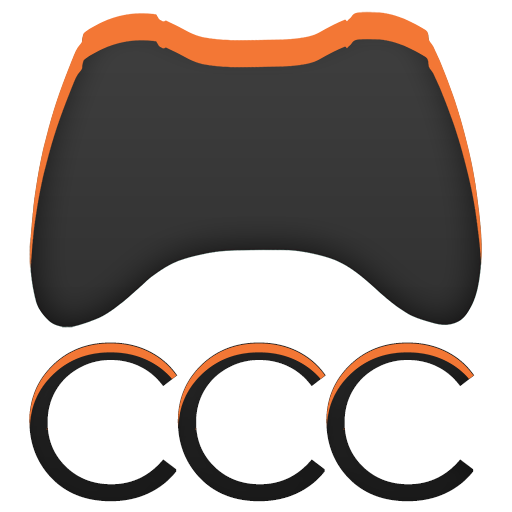
<style>
.page{position:relative;width:512px;height:512px;background:#ffffff}
.page>*{position:absolute;margin:0}
.t1{font:206.2px "CenturyGothic";letter-spacing:-0.12em;color:#1e1e1e;font-weight:bold}
</style>
<div class="page">
<p class="t1" style="left:29px;top:342px;width:446px;height:160px">CCC</p>
</div>
